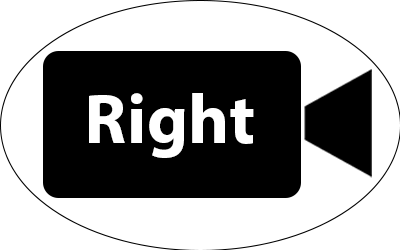
<style>
.page{position:relative;width:400px;height:250px;background:#ffffff}
.page>*{position:absolute;margin:0}
.t1{font:71px "MyriadPro-Bold";color:#ffffff}
</style>
<div class="page">
<p class="t1" style="left:89px;top:93px;width:165px;height:65px">Right</p>
</div>
